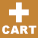
<style>
.page{position:relative;width:38px;height:38px;background:#c48435}
.page>*{position:absolute;margin:0}
.t1{font:11px "Arial-Black";color:#ffffff;text-transform:uppercase}
.t2{font:37px "Arial-Black";color:#ffffff;text-transform:uppercase}
</style>
<div class="page">
<p class="t1" style="left:2px;top:2px;width:35px;height:32px;text-align:center"><span class="t2">+<br></span>CART</p>
</div>
